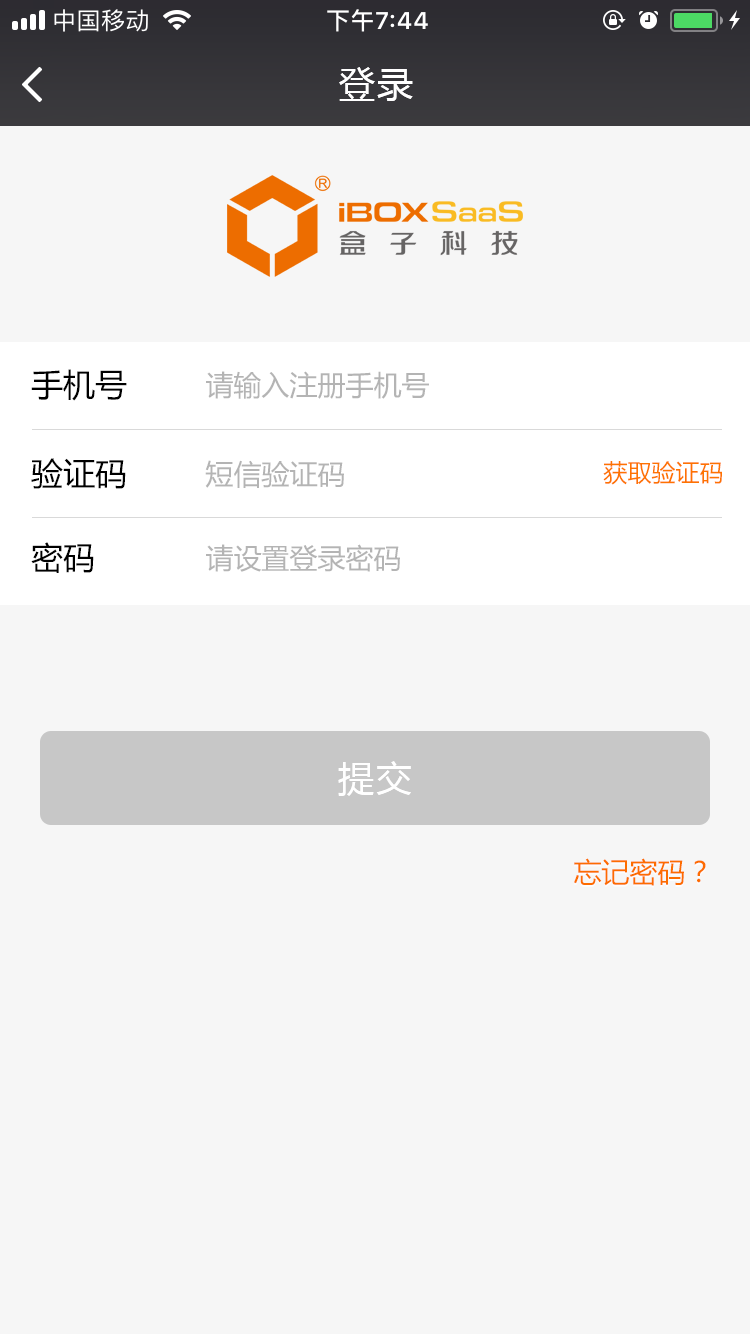
<style>
.page{position:relative;width:750px;height:1334px;background:#f6f6f6}
.page>*{position:absolute;margin:0}
.t1{font:36px "MicrosoftYaHei";letter-spacing:0.08em;color:#ffffff}
.t2{font:32px "MicrosoftYaHei";color:#000000}
.t3{font:28px "MicrosoftYaHei";color:#b4b4b4}
.t4{font:24px "MicrosoftYaHei";color:#fe7301}
.t5{font:28px "MicrosoftYaHei";color:#fd6c00}
</style>
<div class="page">
<p class="t1" style="left:339px;top:67px;width:74px;height:34px">登录</p>
<p class="t2" style="left:31px;top:369px;width:96px;height:32px">手机号</p>
<p class="t3" style="left:206px;top:371px;width:223px;height:28px">请输入注册手机号</p>
<p class="t2" style="left:31px;top:458px;width:95px;height:31px">验证码</p>
<p class="t3" style="left:205px;top:460px;width:139px;height:28px">短信验证码</p>
<p class="t4" style="left:603px;top:461px;width:119px;height:24px">获取验证码</p>
<p class="t2" style="left:31px;top:542px;width:63px;height:31px">密码</p>
<p class="t3" style="left:206px;top:544px;width:194px;height:28px">请设置登录密码</p>
<p class="t1" style="left:338px;top:761px;width:73px;height:35px">提交</p>
<p class="t5" style="left:574px;top:858px;width:132px;height:28px">忘记密码？</p>
</div>
